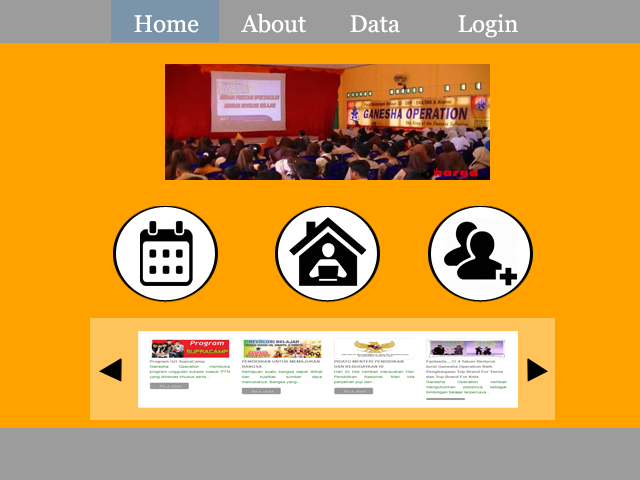
<style>
.page{position:relative;width:640px;height:480px;background:#ffa200}
.page>*{position:absolute;margin:0}
.t1{font:24px "Georgia";color:#ffffff}
</style>
<div class="page">
<p class="t1" style="left:134px;top:13px;width:384px;height:25px">Home  About  Data  Login</p>
</div>
